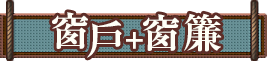
<style>
.page{position:relative;width:267px;height:61px;background:#ffffff}
.page>*{position:absolute;margin:0}
.t1{font:40px "RyuminPr6N-ExBold";letter-spacing:-0.08em;color:#fffff7}
.t2{font:40px "RyuminPr6N-ExBold";letter-spacing:0.075em;color:#fffff7}
.t3{font:30px "RyuminPro-ExBold";letter-spacing:-0.1em;color:#fffff7}
</style>
<div class="page">
<p class="t1" style="left:52px;top:12px;width:36px;height:37px">窗</p>
<p class="t2" style="left:143px;top:13px;width:79px;height:39px">窗簾</p>
<p class="t1" style="left:87px;top:20px;width:35px;height:38px">戸</p>
<p class="t3" style="left:126px;top:32px;width:17px;height:17px">+</p>
</div>
